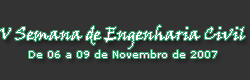
<style>
.page{position:relative;width:250px;height:80px;background:#333333}
.page>*{position:absolute;margin:0}
.t1{font:16.7px "VinerHandITC";color:#ffffff}
.t2{font:10.4px "Verdana";color:#fefefe}
</style>
<div class="page">
<p class="t1" style="left:0px;top:25px;width:245px;height:24px">V Semana de Engenharia Civil</p>
<p class="t2" style="left:29px;top:50px;width:188px;height:8px">De 06 a 09 de Novembro de 2007</p>
</div>
